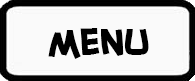
<style>
.page{position:relative;width:195px;height:81px;background:#fafafa}
.page>*{position:absolute;margin:0}
.t1{font:38px "CreativeBlockBBBold";letter-spacing:-0.05em;color:#000000}
</style>
<div class="page">
<p class="t1" style="left:48px;top:28px;width:101px;height:31px">menu</p>
</div>
